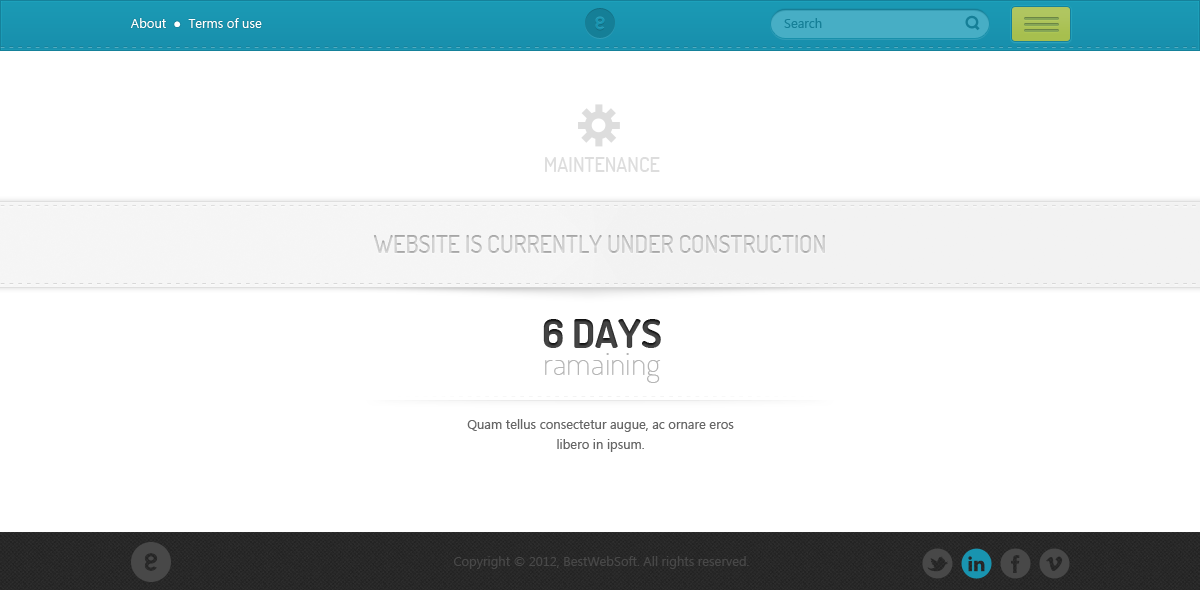
<style>
.page{position:relative;width:1200px;height:590px;background:#ffffff}
.page>*{position:absolute;margin:0}
.t1{font:13px "Ebrima";color:#ffffff}
.t2{font:13px "ArialMT";color:#ffffff}
.t3{font:13px "Ebrima";color:#157f97}
.t4{font:20px "Dosis-Medium";color:#dddddd;text-transform:uppercase}
.t5{font:24px "Dosis-Medium";color:#c7c7c7;text-transform:uppercase}
.t6{font:40px "Dosis-Bold";color:#444444;text-transform:uppercase}
.t7{font:32px "Dosis-ExtraLight";color:#b5b5b5}
.t8{font:13px "Ebrima";color:#e3e3e3}
.t9{font:13px/20px "Ebrima";color:#666666}
.t10{font:13px "Ebrima";color:#484848}
</style>
<div class="page">
<p class="t1" style="left:130px;top:18px;width:132px;height:10px">About  <span class="t2">●  </span>Terms of use</p>
<p class="t3" style="left:784px;top:18px;width:38px;height:10px">Search</p>
<p class="t4" style="left:545px;top:157px;width:115px;height:15px">maintenance</p>
<p class="t5" style="left:373px;top:235px;width:452px;height:18px">Website is currently under construction</p>
<p class="t6" style="left:543px;top:319px;width:118px;height:29px">6 days</p>
<p class="t7" style="left:545px;top:353px;width:116px;height:30px">ramaining</p>
<p class="t8" style="left:380px;top:396px;width:451px;height:1px">- - - - - - - - - - - - - - - - - - - - - - - - - - - - - - - - - - - - - - - - - - - - - - - - - - - -</p>
<p class="t9" style="left:467px;top:419px;width:267px;height:33px;text-align:center">Quam tellus consectetur augue, ac ornare eros libero in ipsum.</p>
<p class="t10" style="left:454px;top:556px;width:295px;height:13px">Copyright © 2012, BestWebSoft. All rights reserved.</p>
</div>
